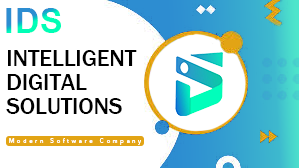
<style>
.page{position:relative;width:299px;height:168px;background:#ffffff}
.page>*{position:absolute;margin:0}
.t1{font:34px "Arial-BoldMT";text-transform:uppercase}
.t2{font:23.5px/23.9px "FranklinGothic-Medium";color:#000000;text-transform:uppercase}
.t3{font:6.2px "ProximaNova-Regular";letter-spacing:0.42em;color:#ffffff}
</style>
<div class="page">
<p class="t1" style="left:6px;top:8px;width:55px;height:25px">IDS</p>
<p class="t2" style="left:6px;top:50px;width:131px;height:64px">Intelligent<br>Digital<br>Solutions</p>
<p class="t3" style="left:9px;top:138px;width:132px;height:7px">Modern Software Company</p>
</div>
